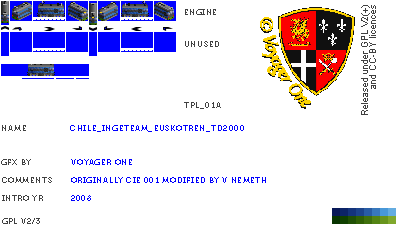
<style>
.page{position:relative;width:400px;height:230px;background:#ffffff}
.page>*{position:absolute;margin:0}
.t1{font:8px "Museo700-Regular";letter-spacing:0.075em;color:#404040;text-transform:uppercase}
.t2{font:8px "Museo700-Regular";letter-spacing:0.075em;color:#0000ff;text-transform:uppercase}
</style>
<div class="page">
<p class="t1" style="left:185px;top:9px;width:31px;height:6px">engine</p>
<p class="t1" style="left:185px;top:41px;width:34px;height:6px">unused</p>
<p class="t1" style="left:184px;top:102px;width:37px;height:7px">tpl_01a</p>
<p class="t1" style="left:2px;top:125px;width:24px;height:6px">name</p>
<p class="t2" style="left:70px;top:125px;width:174px;height:7px">Chile_Ingeteam_Euskotren_TD2000</p>
<p class="t1" style="left:1px;top:159px;width:30px;height:6px">gfx by</p>
<p class="t2" style="left:71px;top:159px;width:61px;height:6px">voyager one</p>
<p class="t1" style="left:2px;top:177px;width:50px;height:6px">comments</p>
<p class="t2" style="left:71px;top:177px;width:195px;height:6px">originally cie 001 modified by v nemeth</p>
<p class="t1" style="left:2px;top:195px;width:41px;height:6px">intro yr</p>
<p class="t2" style="left:71px;top:195px;width:20px;height:6px">2008</p>
<p class="t1" style="left:2px;top:218px;width:38px;height:6px">gpl v2/3</p>
</div>
